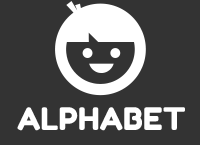
<style>
.page{position:relative;width:200px;height:145px;background:#333333}
.page>*{position:absolute;margin:0}
.t1{font:30.9px "FredokaOne-Regular";color:#ffffff;text-transform:uppercase}
</style>
<div class="page">
<p class="t1" style="left:17px;top:107px;width:168px;height:24px">alphabet</p>
</div>
